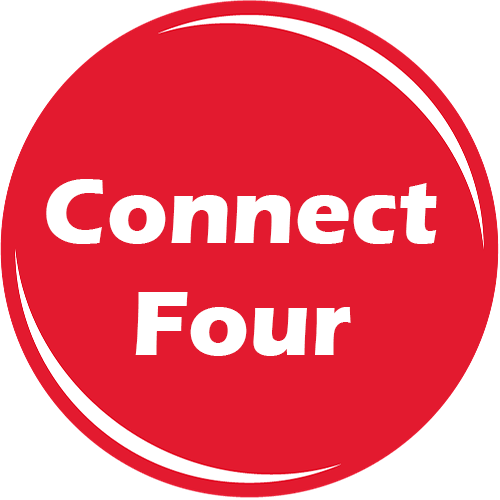
<style>
.page{position:relative;width:500px;height:500px;background:#e31a2f}
.page>*{position:absolute;margin:0}
.t1{font:94px "ErasITC-Bold";color:#ffffff}
</style>
<div class="page">
<p class="t1" style="left:46px;top:179px;width:391px;height:177px;text-align:center">Connect   Four</p>
</div>
